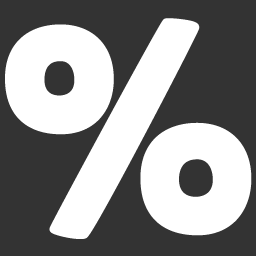
<style>
.page{position:relative;width:256px;height:256px;background:#333333}
.page>*{position:absolute;margin:0}
.t1{font:287.8px "MikadoBold";color:#ffffff;font-weight:bold;scale:1.05 1}
</style>
<div class="page">
<p class="t1" style="left:5px;top:18px;width:247px;height:221px">%</p>
</div>
